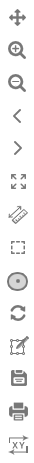
<style>
.page{position:relative;width:34px;height:463px;background:#ffffff}
.page>*{position:absolute;margin:0}
.t1{font:8.5px "NotoSansCJKkr-Regular";letter-spacing:-0.02em;color:#777777;scale:1.1 1}
</style>
<div class="page">
<p class="t1" style="left:12px;top:442px;width:13px;height:7px">X Y</p>
</div>
